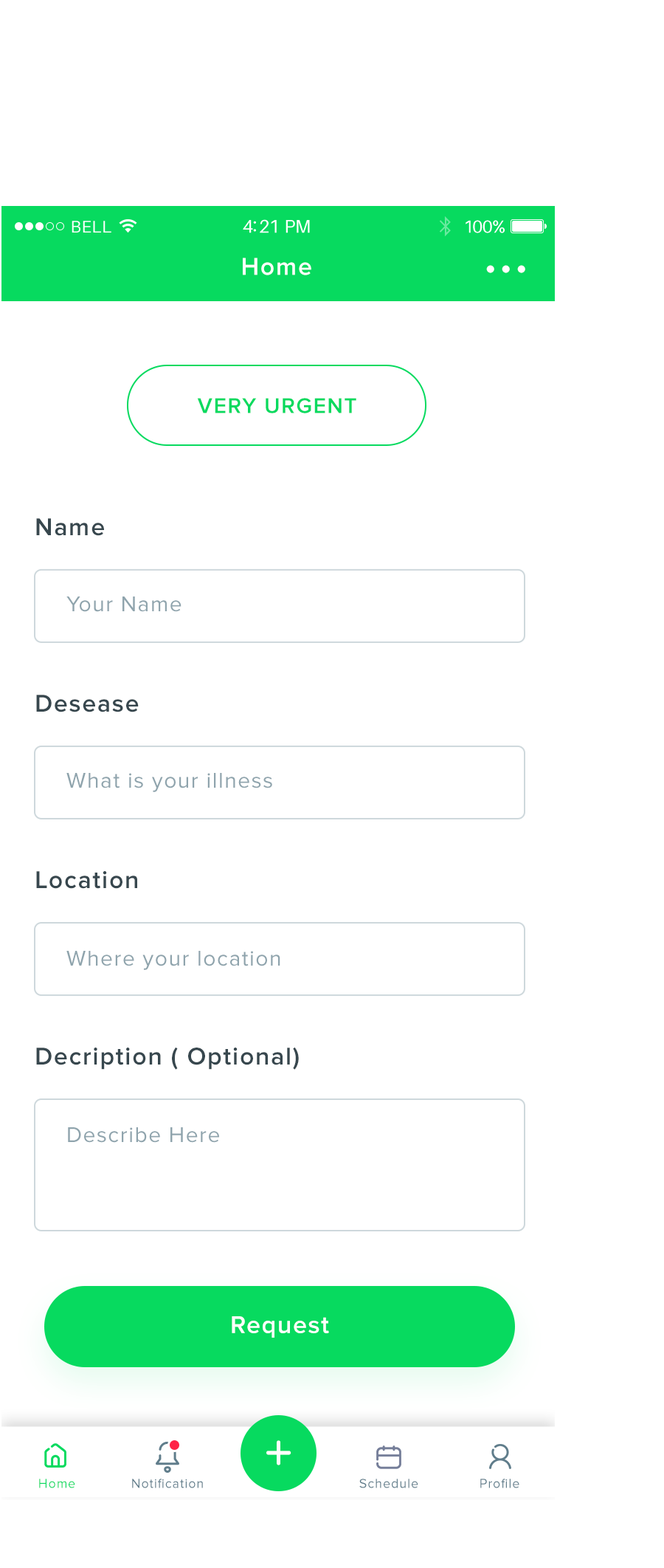
<style>
.page{position:relative;width:664px;height:1568px;background:#ffffff}
.page>*{position:absolute;margin:0}
.t1{font:25.1px "ProximaNova-Semibold";letter-spacing:0.05em;color:#ffffff}
.t2{font:52.4px "ProximaNova-Semibold";letter-spacing:0.05em;color:#ffffff}
.t3{font:22.1px "ProximaNova-Semibold";letter-spacing:0.05em;color:#07da5f}
.t4{font:25.1px "ProximaNova-Semibold";letter-spacing:0.05em;color:#37474e}
.t5{font:22.2px "ProximaNova-Regular";letter-spacing:0.05em;color:#8fa4ad}
.t6{font:50.1px "Nunito-SemiBold";letter-spacing:0.05em;color:#ffffff}
.t7{font:13.3px "ProximaNova-Regular";letter-spacing:0.05em;color:#07da5f}
.t8{font:13.3px "ProximaNova-Regular";letter-spacing:0.05em;color:#607d8b}
</style>
<div class="page">
<p class="t1" style="left:243px;top:258px;width:69px;height:17px">Home</p>
<p class="t2" style="left:486px;top:265px;width:40px;height:8px">...</p>
<p class="t3" style="left:197px;top:398px;width:160px;height:15px">VERY URGENT</p>
<p class="t4" style="left:36px;top:518px;width:68px;height:18px">Name</p>
<p class="t5" style="left:66px;top:596px;width:116px;height:16px">Your Name</p>
<p class="t4" style="left:36px;top:695px;width:103px;height:17px">Desease</p>
<p class="t5" style="left:66px;top:773px;width:206px;height:19px">What is your illness</p>
<p class="t4" style="left:36px;top:871px;width:101px;height:18px">Location</p>
<p class="t5" style="left:66px;top:951px;width:215px;height:19px">Where your location</p>
<p class="t4" style="left:36px;top:1047px;width:263px;height:23px">Decription ( Optional)</p>
<p class="t5" style="left:68px;top:1127px;width:151px;height:16px">Describe Here</p>
<p class="t1" style="left:232px;top:1316px;width:97px;height:22px">Request</p>
<p class="t6" style="left:267px;top:1440px;width:25px;height:25px">+</p>
<p class="t7" style="left:39px;top:1479px;width:36px;height:9px">Home</p>
<p class="t8" style="left:132px;top:1479px;width:71px;height:9px">Notification</p>
<p class="t8" style="left:360px;top:1479px;width:59px;height:9px">Schedule</p>
<p class="t8" style="left:481px;top:1479px;width:39px;height:9px">Profile</p>
</div>
